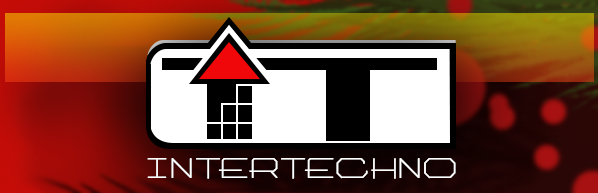
<style>
.page{position:relative;width:598px;height:193px}
.page>*{position:absolute;margin:0}
.t1{font:41.7px "ArchitextOneType";color:#fefefe}
</style>
<div class="page">
<p class="t1" style="left:147px;top:158px;width:309px;height:21px">intertechno</p>
</div>
